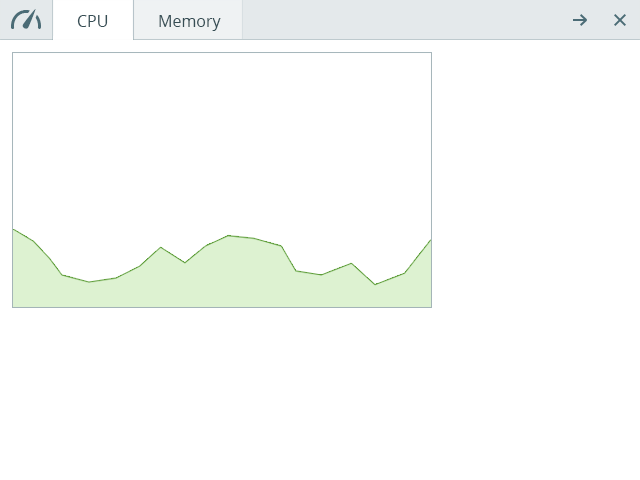
<style>
.page{position:relative;width:640px;height:480px;background:#ffffff}
.page>*{position:absolute;margin:0}
.t1{font:16px "OpenSans";color:#364e55}
</style>
<div class="page">
<p class="t1" style="left:77px;top:15px;width:31px;height:12px">CPU</p>
<p class="t1" style="left:159px;top:15px;width:62px;height:16px">Memory</p>
</div>
